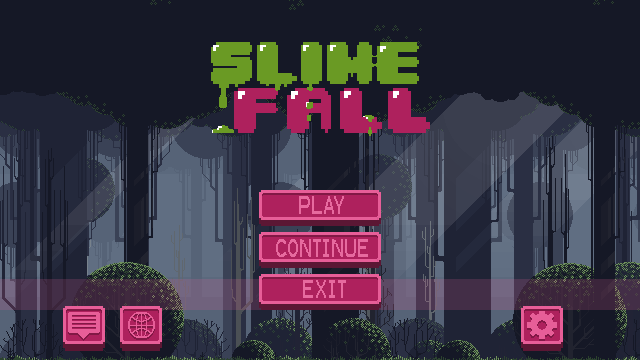
<style>
.page{position:relative;width:640px;height:360px;background:#151826}
.page>*{position:absolute;margin:0}
.t1{font:24px "KarmaSuture";color:#e76a9f}
</style>
<div class="page">
<p class="t1" style="left:299px;top:196px;width:45px;height:18px">PLAY</p>
<p class="t1" style="left:276px;top:239px;width:92px;height:18px">CONTINUE</p>
<p class="t1" style="left:303px;top:280px;width:43px;height:18px">EXIT</p>
</div>
